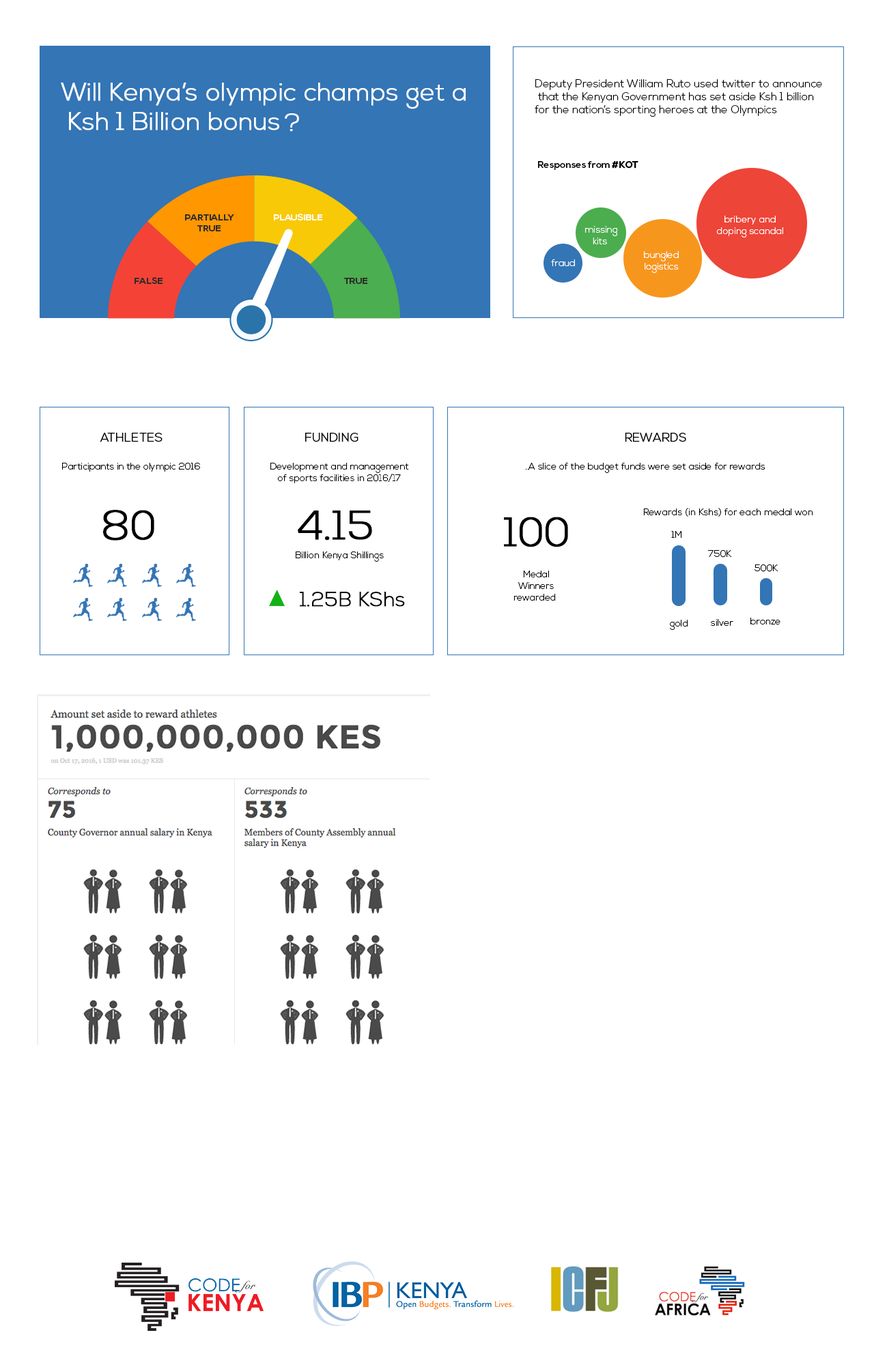
<style>
.page{position:relative;width:874px;height:1365px;background:#ffffff}
.page>*{position:absolute;margin:0}
.t1{font:24.6px "NexaLight";color:#fefefe;font-weight:bold}
.t2{font:10.9px "NexaLight";color:#000000}
.t3{font:24.6px "NexaLight";color:#ffffff;font-weight:bold}
.t4{font:9.6px "NexaBold";color:#000000}
.t5{font:9.6px "NexaBold";color:#000000;font-weight:bold}
.t6{font:9.6px "NexaLight";color:#ffffff}
.t7{font:12.3px "NexaLight";color:#000000;text-transform:uppercase;font-weight:bold}
.t8{font:9.6px "NexaLight";color:#000000}
.t9{font:40.9px "NexaLight";color:#000000;text-transform:uppercase;font-weight:bold}
.t10{font:9.5px "NexaLight";color:#000000}
.t11{font:20.5px "NexaLight";color:#000000;font-weight:bold}
</style>
<div class="page">
<p class="t1" style="left:61px;top:83px;width:404px;height:47px;text-align:right">Will Kenya’s olympic champs get a<br>Ksh 1 Billion bonus</p>
<p class="t2" style="left:534px;top:79px;width:288px;height:38px;text-align:right">Deputy President William Ruto used twitter to announce<br> that the Kenyan Government has set aside Ksh 1 billion <br>for the nation’s sporting heroes at the Olympics</p>
<p class="t3" style="left:285px;top:113px;width:14px;height:19px">?</p>
<p class="t4" style="left:538px;top:161px;width:100px;height:9px">Responses from <span class="t5">#KOT</span></p>
<p class="t6" style="left:716px;top:216px;width:67px;height:22px;text-align:center">bribery and<br>doping scandal</p>
<p class="t6" style="left:585px;top:226px;width:33px;height:18px;text-align:center">missing <br>kits</p>
<p class="t6" style="left:644px;top:251px;width:34px;height:22px;text-align:center">bungled<br>logistics</p>
<p class="t6" style="left:551px;top:259px;width:24px;height:7px">fraud</p>
<p class="t7" style="left:100px;top:433px;width:62px;height:9px">Athletes</p>
<p class="t7" style="left:305px;top:433px;width:53px;height:9px">funding</p>
<p class="t7" style="left:624px;top:433px;width:62px;height:9px">rewards</p>
<p class="t8" style="left:62px;top:463px;width:138px;height:9px">Participants in the olympic 2016</p>
<p class="t8" style="left:270px;top:463px;width:139px;height:20px;text-align:center">Development and management <br>of sports facilities in 2016/17</p>
<p class="t8" style="left:525px;top:463px;width:240px;height:10px">A slice of the budget funds were set aside for rewards..</p>
<p class="t9" style="left:103px;top:510px;width:51px;height:31px">80</p>
<p class="t8" style="left:643px;top:508px;width:170px;height:9px">Rewards (in Kshs) for each medal won</p>
<p class="t9" style="left:298px;top:511px;width:74px;height:30px">4.15</p>
<p class="t9" style="left:504px;top:517px;width:64px;height:30px">100</p>
<p class="t10" style="left:671px;top:531px;width:11px;height:7px">1M</p>
<p class="t8" style="left:296px;top:551px;width:88px;height:11px">Billion Kenya Shillings</p>
<p class="t10" style="left:708px;top:550px;width:24px;height:8px">750K</p>
<p class="t10" style="left:754px;top:564px;width:24px;height:8px">500K</p>
<p class="t8" style="left:513px;top:571px;width:43px;height:30px;text-align:center">Medal <br>Winners <br>rewarded</p>
<p class="t11" style="left:300px;top:592px;width:37px;height:15px">1.25</p>
<p class="t11" style="left:339px;top:592px;width:66px;height:15px">B KShs</p>
<p class="t10" style="left:750px;top:618px;width:30px;height:6px">bronze</p>
<p class="t10" style="left:670px;top:620px;width:18px;height:10px">gold</p>
<p class="t10" style="left:710px;top:619px;width:23px;height:7px">silver</p>
</div>
